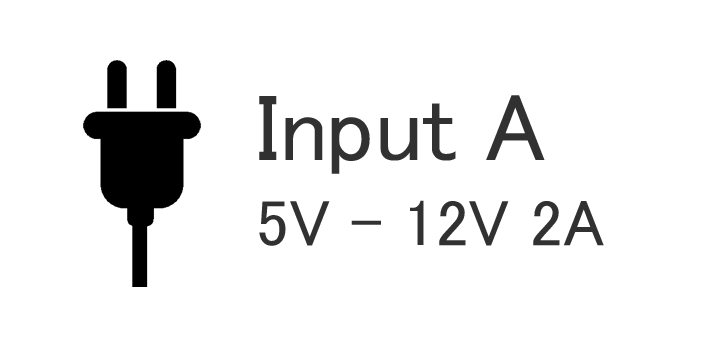
<style>
.page{position:relative;width:709px;height:354px;background:#ffffff}
.page>*{position:absolute;margin:0}
.t1{font:95.7px "MS-PGothic";color:#313131}
.t2{font:65.5px "MS-PGothic";color:#313131}
</style>
<div class="page">
<p class="t1" style="left:259px;top:95px;width:286px;height:79px">Input A</p>
<p class="t2" style="left:259px;top:200px;width:345px;height:46px">5V - 12V 2A</p>
</div>
